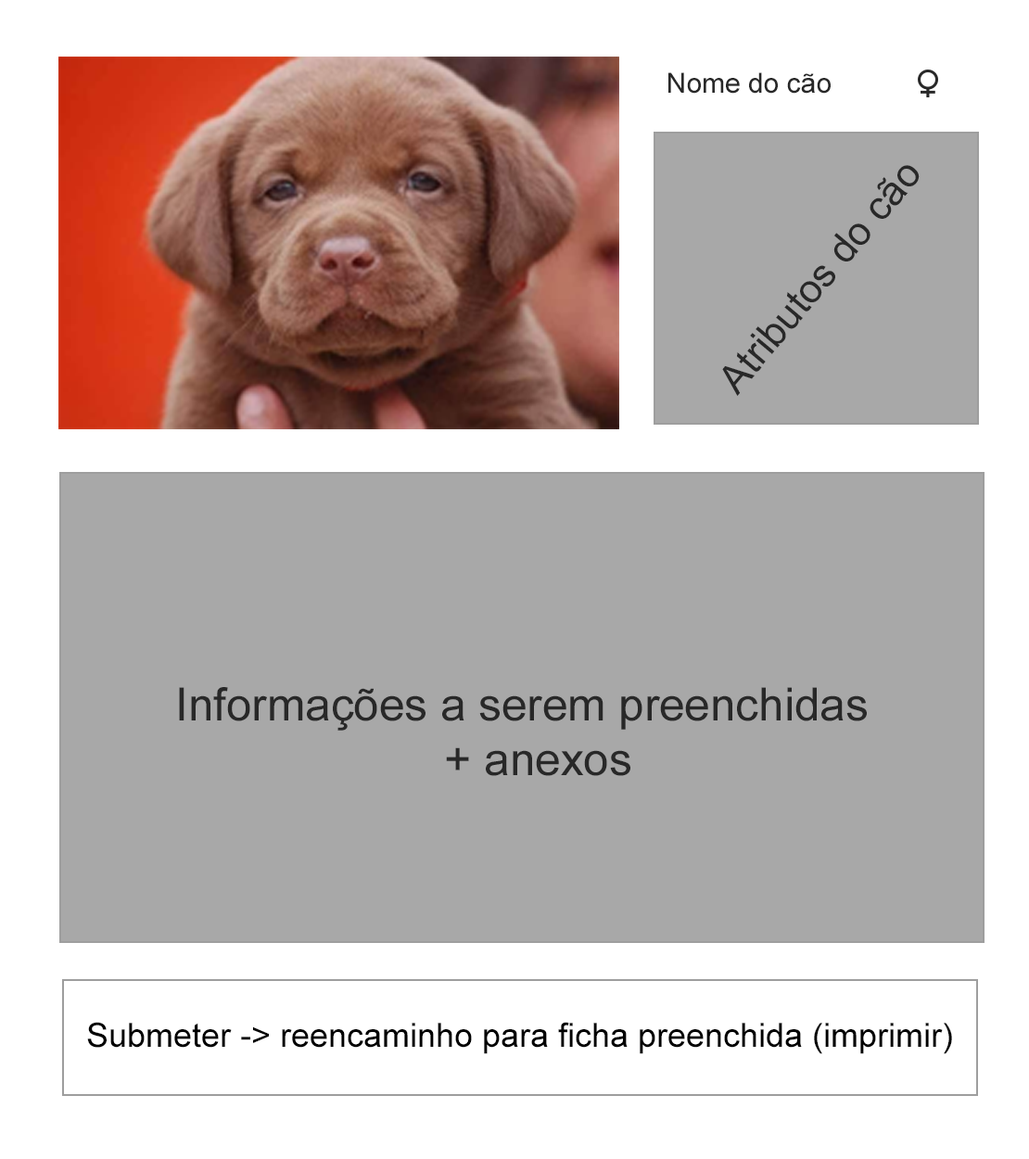
<style>
.page{position:relative;width:1029px;height:1159px;background:#a8a8a8}
.page>*{position:absolute;margin:0}
.t1{font:27.8px "ArialMT";color:#282828}
.t2{font:40px "ArialMT";color:#282828}
.t3{font:45.8px "ArialMT";color:#282828}
.t4{font:33.4px "ArialMT";color:#000000}
</style>
<div class="page">
<p class="t1" style="left:668px;top:72px;width:163px;height:22px">Nome do cão</p>
<p class="t2" style="left:722px;top:165px;width:198px;height:231px;rotate:-50deg">Atributos do cão</p>
<p class="t3" style="left:179px;top:687px;width:688px;height:89px">Informações a serem preenchidas<br>                                                         + anexos</p>
<p class="t4" style="left:87px;top:1022px;width:865px;height:32px">Submeter -&gt; reencaminho para ficha preenchida (imprimir)</p>
</div>
